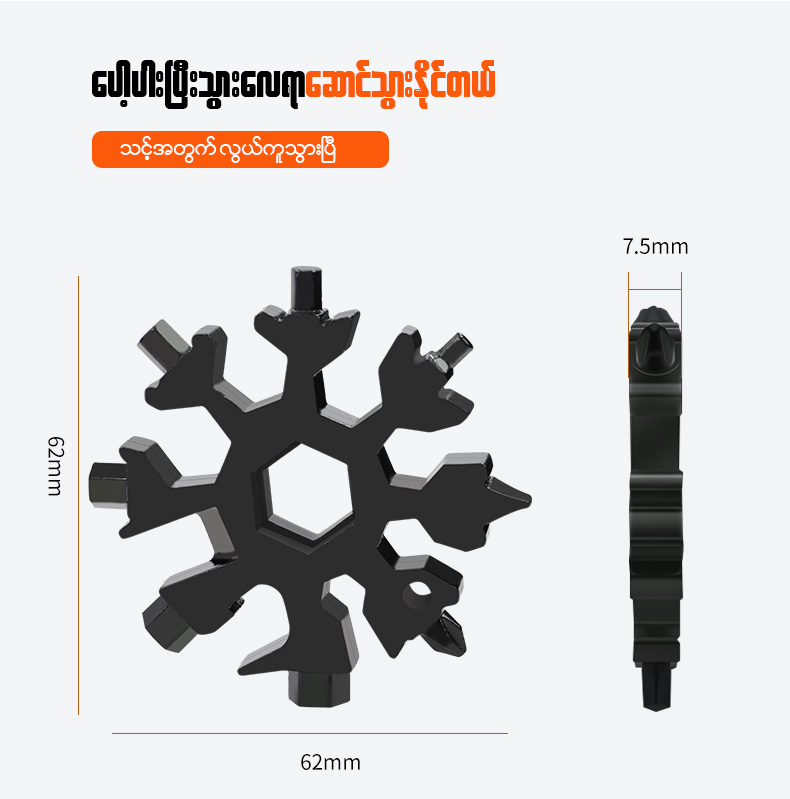
<style>
.page{position:relative;width:790px;height:799px;background:#f4f5f6}
.page>*{position:absolute;margin:0}
.t1{font:49.4px "W30ArtHouse";color:#000000}
.t2{font:49.4px "W30ArtHouse";color:#fa5a0a}
.t3{font:29.9px "W01ArtHouseWin";color:#ffffff}
</style>
<div class="page">
<p class="t1" style="left:92px;top:60px;width:404px;height:49px">ayghyg;NyD;oGm;av&amp;m<span class="t2">aqmifoGm;Edkifw,f</span></p>
<p class="t3" style="left:120px;top:136px;width:216px;height:27px">oifhtwGuff vG,fuloGm;NyD</p>
</div>
